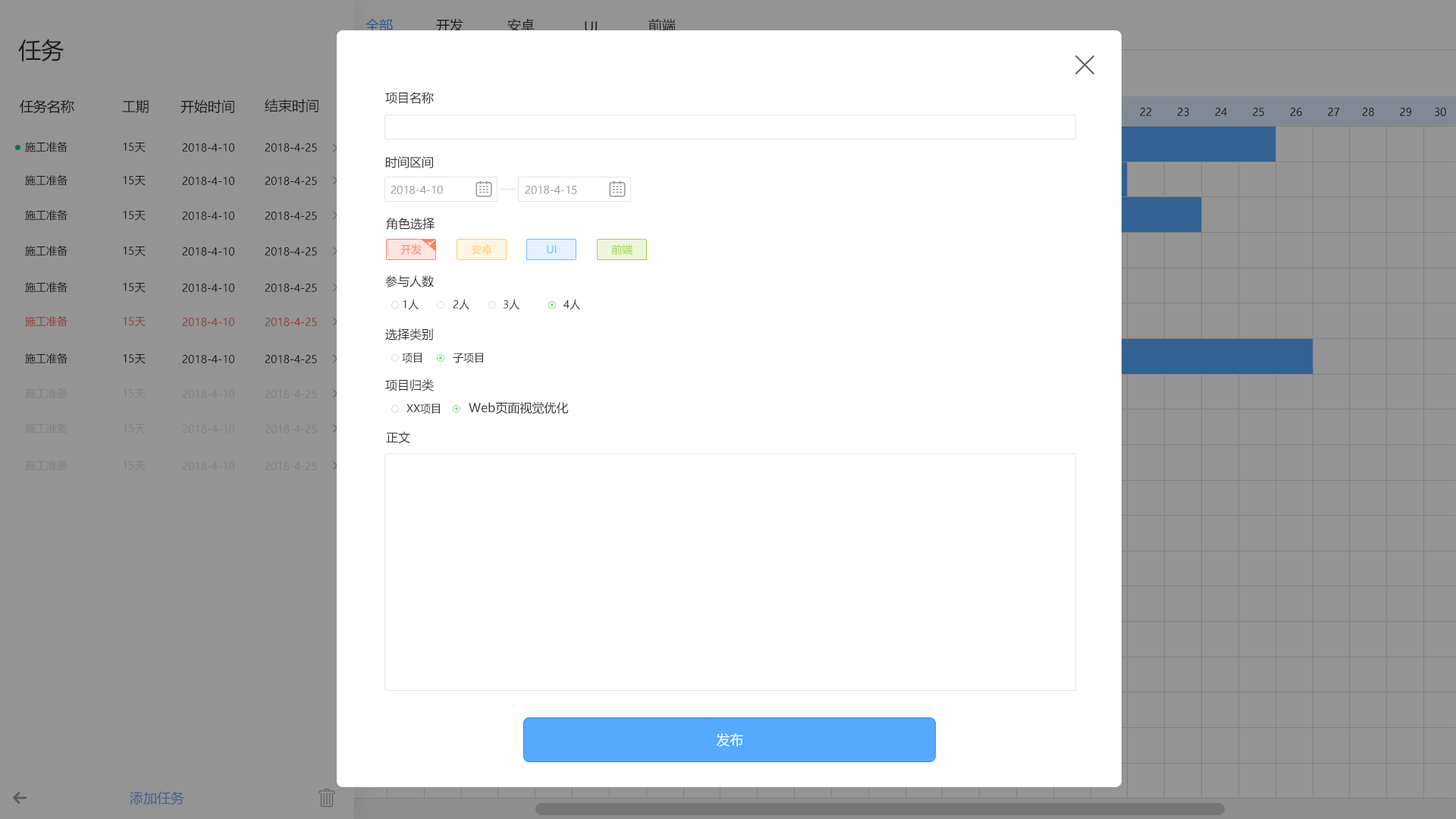
<style>
.page{position:relative;width:1456px;height:819px;background:#ffffff}
.page>*{position:absolute;margin:0}
.t1{font:13.6px "MicrosoftYaHei";color:#215a93}
.t2{font:13.6px "MicrosoftYaHei";color:#333333}
.t3{font:22.7px "MicrosoftYaHei";color:#333333}
.t4{font:13.6px "MicrosoftYaHei";color:#282828}
.t5{font:12.1px "MicrosoftYaHei";color:#333333}
.t6{font:10.6px "MicrosoftYaHei";color:#282828}
.t7{font:10.6px "MicrosoftYaHei";color:#999999}
.t8{font:10.6px "MicrosoftYaHei";color:#ff815f}
.t9{font:10.6px "MicrosoftYaHei";color:#ffce6f}
.t10{font:10.6px "MicrosoftYaHei";color:#6fbfff}
.t11{font:10.6px "MicrosoftYaHei";color:#a1d246}
.t12{font:10.6px "MicrosoftYaHei";color:#333333}
.t13{font:10.6px "MicrosoftYaHei";color:#933e38}
.t14{font:10.6px "MicrosoftYaHei";color:#808080}
.t15{font:13.6px "MicrosoftYaHei";color:#ffffff}
.t16{font:13.6px "MicrosoftYaHei";color:#446292}
</style>
<div class="page">
<p class="t1" style="left:366px;top:18px;width:27px;height:14px">全部</p>
<p class="t2" style="left:436px;top:18px;width:27px;height:15px">开发</p>
<p class="t2" style="left:507px;top:18px;width:28px;height:14px">安卓</p>
<p class="t2" style="left:585px;top:21px;width:12px;height:11px">UI</p>
<p class="t2" style="left:648px;top:18px;width:28px;height:14px">前端</p>
<p class="t3" style="left:18px;top:39px;width:46px;height:22px">任务</p>
<p class="t4" style="left:20px;top:99px;width:54px;height:15px">任务名称</p>
<p class="t4" style="left:122px;top:100px;width:27px;height:14px">工期</p>
<p class="t2" style="left:180px;top:99px;width:54px;height:15px">开始时间</p>
<p class="t2" style="left:265px;top:99px;width:53px;height:13px">结束时间</p>
<p class="t5" style="left:385px;top:92px;width:49px;height:12px">项目名称</p>
<p class="t6" style="left:25px;top:141px;width:42px;height:11px">施工准备</p>
<p class="t6" style="left:123px;top:143px;width:23px;height:9px">15天</p>
<p class="t6" style="left:182px;top:143px;width:52px;height:9px">2018-4-10</p>
<p class="t6" style="left:265px;top:143px;width:52px;height:9px">2018-4-25</p>
<p class="t5" style="left:385px;top:156px;width:48px;height:12px">时间区间</p>
<p class="t6" style="left:25px;top:174px;width:42px;height:12px">施工准备</p>
<p class="t6" style="left:123px;top:176px;width:23px;height:10px">15天</p>
<p class="t6" style="left:182px;top:177px;width:52px;height:8px">2018-4-10</p>
<p class="t6" style="left:265px;top:177px;width:52px;height:8px">2018-4-25</p>
<p class="t7" style="left:391px;top:185px;width:52px;height:9px">2018-4-10</p>
<p class="t7" style="left:525px;top:185px;width:52px;height:9px">2018-4-15</p>
<p class="t6" style="left:25px;top:209px;width:42px;height:12px">施工准备</p>
<p class="t6" style="left:123px;top:211px;width:23px;height:10px">15天</p>
<p class="t6" style="left:182px;top:212px;width:52px;height:8px">2018-4-10</p>
<p class="t6" style="left:265px;top:212px;width:52px;height:8px">2018-4-25</p>
<p class="t5" style="left:386px;top:218px;width:49px;height:12px">角色选择</p>
<p class="t6" style="left:25px;top:245px;width:42px;height:11px">施工准备</p>
<p class="t8" style="left:400px;top:244px;width:22px;height:11px">开发</p>
<p class="t9" style="left:471px;top:244px;width:21px;height:11px">安卓</p>
<p class="t10" style="left:547px;top:245px;width:10px;height:9px">UI</p>
<p class="t11" style="left:611px;top:244px;width:22px;height:11px">前端</p>
<p class="t6" style="left:123px;top:246px;width:23px;height:10px">15天</p>
<p class="t6" style="left:182px;top:247px;width:52px;height:9px">2018-4-10</p>
<p class="t6" style="left:265px;top:247px;width:52px;height:9px">2018-4-25</p>
<p class="t6" style="left:25px;top:281px;width:42px;height:12px">施工准备</p>
<p class="t5" style="left:385px;top:275px;width:49px;height:12px">参与人数</p>
<p class="t6" style="left:123px;top:283px;width:23px;height:10px">15天</p>
<p class="t6" style="left:182px;top:284px;width:52px;height:8px">2018-4-10</p>
<p class="t6" style="left:265px;top:284px;width:52px;height:8px">2018-4-25</p>
<p class="t12" style="left:403px;top:300px;width:16px;height:10px">1人</p>
<p class="t12" style="left:453px;top:300px;width:16px;height:10px">2人</p>
<p class="t12" style="left:504px;top:300px;width:15px;height:10px">3人</p>
<p class="t12" style="left:563px;top:300px;width:17px;height:10px">4人</p>
<p class="t13" style="left:25px;top:315px;width:42px;height:12px">施工准备</p>
<p class="t13" style="left:123px;top:317px;width:23px;height:10px">15天</p>
<p class="t13" style="left:182px;top:318px;width:52px;height:8px">2018-4-10</p>
<p class="t13" style="left:265px;top:318px;width:52px;height:8px">2018-4-25</p>
<p class="t5" style="left:385px;top:328px;width:48px;height:12px">选择类别</p>
<p class="t6" style="left:25px;top:353px;width:42px;height:11px">施工准备</p>
<p class="t12" style="left:402px;top:353px;width:20px;height:10px">项目</p>
<p class="t12" style="left:453px;top:353px;width:30px;height:10px">子项目</p>
<p class="t6" style="left:123px;top:354px;width:23px;height:10px">15天</p>
<p class="t6" style="left:182px;top:355px;width:52px;height:8px">2018-4-10</p>
<p class="t6" style="left:265px;top:355px;width:52px;height:8px">2018-4-25</p>
<p class="t14" style="left:25px;top:388px;width:42px;height:11px">施工准备</p>
<p class="t14" style="left:123px;top:389px;width:23px;height:10px">15天</p>
<p class="t14" style="left:182px;top:390px;width:52px;height:8px">2018-4-10</p>
<p class="t14" style="left:265px;top:390px;width:52px;height:8px">2018-4-25</p>
<p class="t5" style="left:385px;top:379px;width:49px;height:12px">项目归类</p>
<p class="t5" style="left:469px;top:402px;width:100px;height:12px">Web页面视觉优化</p>
<p class="t12" style="left:406px;top:403px;width:34px;height:11px">XX项目</p>
<p class="t14" style="left:25px;top:422px;width:42px;height:12px">施工准备</p>
<p class="t14" style="left:123px;top:424px;width:23px;height:10px">15天</p>
<p class="t14" style="left:182px;top:425px;width:52px;height:8px">2018-4-10</p>
<p class="t14" style="left:265px;top:425px;width:52px;height:8px">2018-4-25</p>
<p class="t5" style="left:386px;top:431px;width:24px;height:13px">正文</p>
<p class="t14" style="left:25px;top:460px;width:42px;height:11px">施工准备</p>
<p class="t14" style="left:123px;top:461px;width:23px;height:10px">15天</p>
<p class="t14" style="left:182px;top:462px;width:52px;height:8px">2018-4-10</p>
<p class="t14" style="left:265px;top:462px;width:52px;height:8px">2018-4-25</p>
<p class="t15" style="left:716px;top:733px;width:27px;height:14px">发布</p>
<p class="t16" style="left:130px;top:791px;width:54px;height:14px">添加任务</p>
</div>
